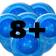
<style>
.page{position:relative;width:56px;height:56px}
.page>*{position:absolute;margin:0}
.t1{font:24px "VerdanaPro-Black";color:#000000}
</style>
<div class="page">
<p class="t1" style="left:9px;top:20px;width:37px;height:19px">8+</p>
</div>
